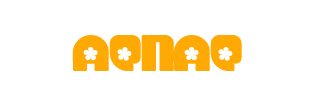
<style>
.page{position:relative;width:320px;height:100px;background:#ffffff}
.page>*{position:absolute;margin:0}
.t1{font:72px "Chick";color:#ffa904}
</style>
<div class="page">
<p class="t1" style="left:72px;top:35px;width:170px;height:36px">AENAE</p>
</div>
